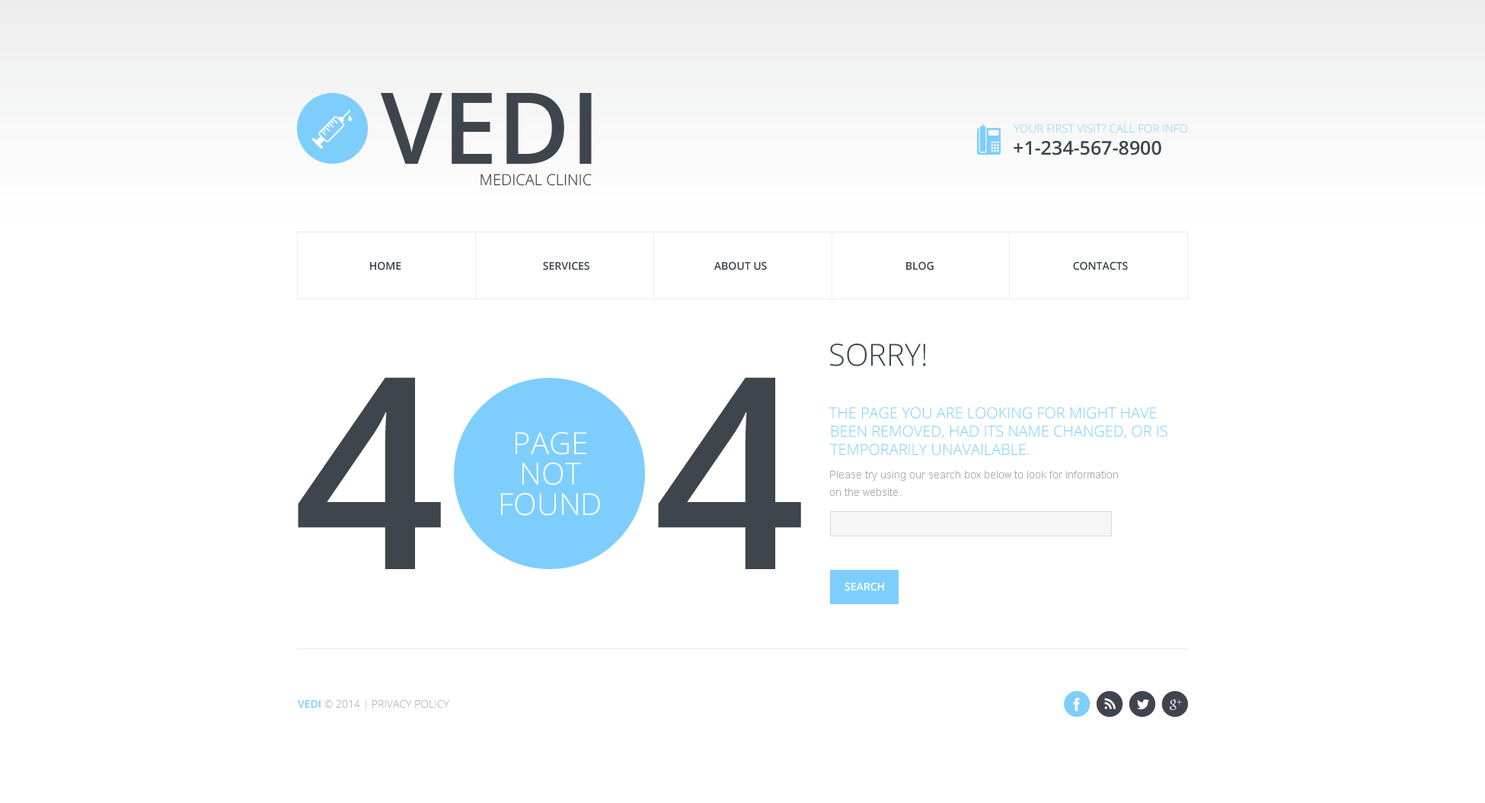
<style>
.page{position:relative;width:1485px;height:803px;background:#ffffff}
.page>*{position:absolute;margin:0}
.t1{font:99px "OpenSans-Semibold";color:#3e454c;text-transform:uppercase}
.t2{font:11.4px "OpenSans-Light";color:#7ecefd;text-transform:uppercase}
.t3{font:19px "OpenSans-Semibold";color:#3e454c;text-transform:uppercase}
.t4{font:15.2px "OpenSans-Light";color:#3e454c;text-transform:uppercase}
.t5{font:10.7px "OpenSans-Semibold";color:#3e454c;text-transform:uppercase}
.t6{font:30.5px "OpenSans-Light";color:#3e454c;text-transform:uppercase}
.t7{font:266.6px "OpenSans-Semibold";color:#3e454c;text-transform:uppercase}
.t8{font:15.2px/18.3px "OpenSans-Light";color:#7ecefd;text-transform:uppercase}
.t9{font:30.5px/30.5px "OpenSans-Light";color:#ffffff;text-transform:uppercase}
.t10{font:10.7px/17.5px "ArialMT";color:#aaadb1}
.t11{font:10.7px "OpenSans-Semibold";color:#ffffff;text-transform:uppercase}
.t12{font:10.7px "OpenSans-Light";color:#92a2af;text-transform:uppercase}
.t13{font:10.7px "OpenSans-Semibold";color:#7ecefd;text-transform:uppercase}
</style>
<div class="page">
<p class="t1" style="left:381px;top:93px;width:211px;height:71px">VEDI</p>
<p class="t2" style="left:1014px;top:124px;width:173px;height:9px">Your first visit? Call for info</p>
<p class="t3" style="left:1014px;top:140px;width:148px;height:15px">+1-234-567-8900</p>
<p class="t4" style="left:481px;top:174px;width:111px;height:12px">Medical clinic</p>
<p class="t5" style="left:370px;top:261px;width:31px;height:9px">home</p>
<p class="t5" style="left:543px;top:261px;width:47px;height:9px">SERVICES</p>
<p class="t5" style="left:714px;top:261px;width:53px;height:9px">about us</p>
<p class="t5" style="left:906px;top:261px;width:28px;height:9px">blog</p>
<p class="t5" style="left:1073px;top:261px;width:55px;height:9px">contacts</p>
<p class="t6" style="left:830px;top:344px;width:96px;height:22px">sorry!</p>
<p class="t7" style="left:298px;top:377px;width:503px;height:192px">4   4</p>
<p class="t8" style="left:829px;top:407px;width:339px;height:48px">The page you are looking for might have been removed, had its name changed, or is temporarily unavailable.<br>Please try using our search box below to look for information on the website.</p>
<p class="t9" style="left:501px;top:432px;width:99px;height:84px;text-align:center">page <br>not <br>found</p>
<p class="t10" style="left:830px;top:471px;width:288px;height:25px">Please try using our search box below to look for information <br>on the website.</p>
<p class="t11" style="left:845px;top:582px;width:39px;height:9px">search</p>
<p class="t12" style="left:298px;top:699px;width:151px;height:12px"><span class="t13">VEDI </span>© 2014 | Privacy Policy</p>
</div>
